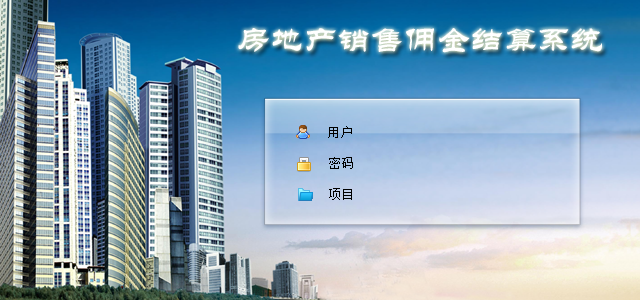
<style>
.page{position:relative;width:640px;height:300px}
.page>*{position:absolute;margin:0}
.t1{font:33.3px "STLiti";color:#ffffff}
.t2{font:12.5px "SimSun";color:#000000}
</style>
<div class="page">
<p class="t1" style="left:238px;top:28px;width:364px;height:25px">房地产销售佣金结算系统</p>
<p class="t2" style="left:328px;top:126px;width:24px;height:12px">用户</p>
<p class="t2" style="left:329px;top:157px;width:24px;height:12px">密码</p>
<p class="t2" style="left:329px;top:188px;width:23px;height:12px">项目</p>
</div>
